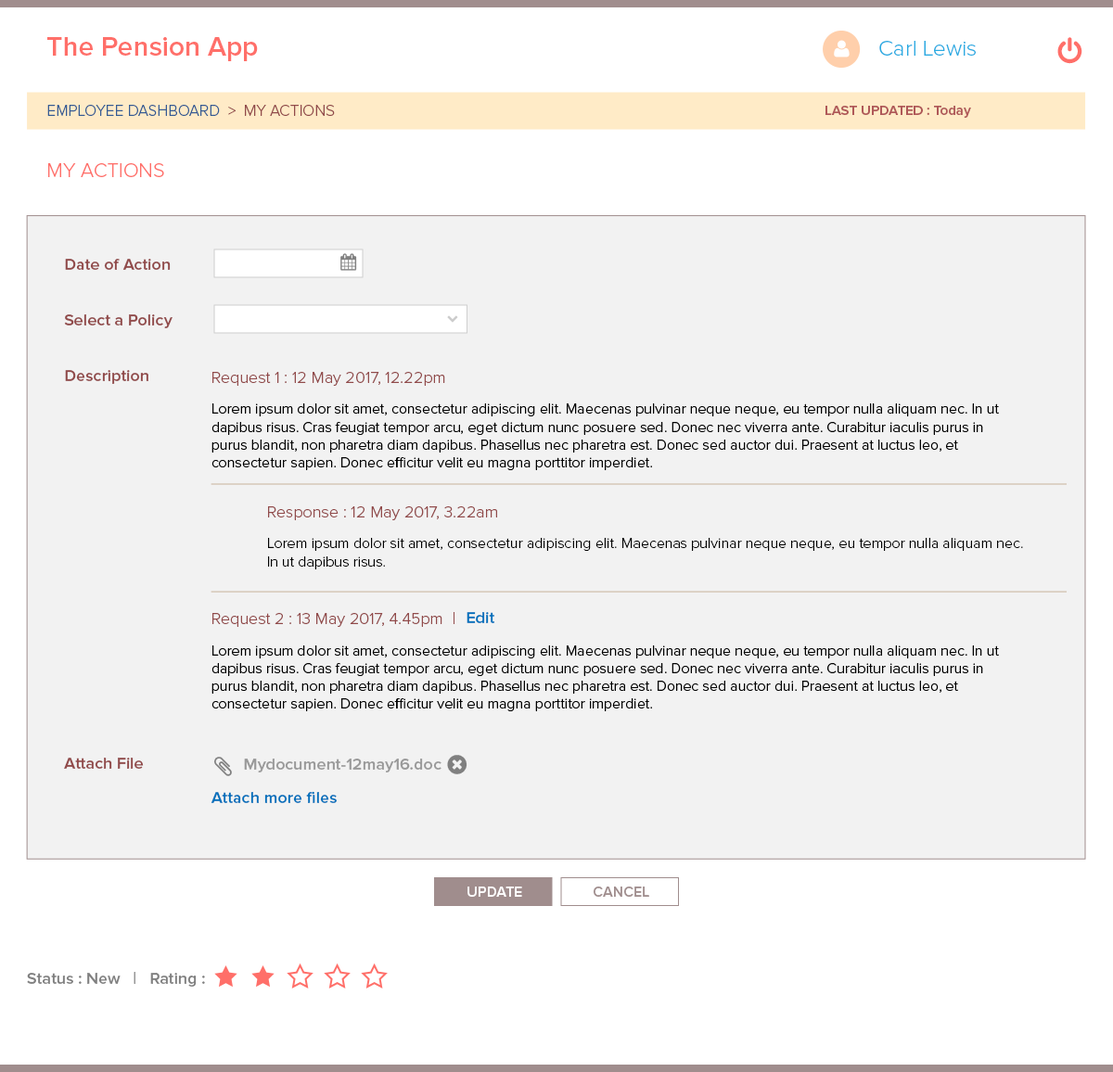
<style>
.page{position:relative;width:1113px;height:1072px;background:#f2f2f2}
.page>*{position:absolute;margin:0}
.t1{font:27.8px "ProximaNova-Semibold";color:#ff6f69}
.t2{font:22.3px "ProximaNova-Light";color:#29abe2}
.t3{font:15.8px "ProximaNova-Light";color:#345b94}
.t4{font:15.8px "ProximaNova-Light";color:#914a4a}
.t5{font:13.9px "ProximaNova-Semibold";color:#af5858}
.t6{font:20.4px "ProximaNova-Light";color:#ff6f69}
.t7{font:16.7px "ProximaNova-Semibold";color:#914a4a}
.t8{font:16.7px "ProximaNova-Light";color:#914a4a}
.t9{font:14.8px "ProximaNova-Light";color:#000000}
.t10{font:16.7px "ProximaNova-Semibold";color:#0071bc}
.t11{font:16.7px "ProximaNova-Semibold";color:#999999}
.t12{font:14.8px "ProximaNova-Semibold";color:#ffffff}
.t13{font:14.8px "ProximaNova-Semibold";color:#a08d8d}
.t14{font:16.7px "ProximaNova-Semibold";color:#808080}
</style>
<div class="page">
<p class="t1" style="left:47px;top:37px;width:211px;height:24px">The Pension App</p>
<p class="t2" style="left:879px;top:41px;width:96px;height:15px">Carl Lewis</p>
<p class="t3" style="left:47px;top:105px;width:288px;height:11px">EMPLOYEE DASHBOARD<span class="t4">  &gt;  MY ACTIONS</span></p>
<p class="t5" style="left:825px;top:106px;width:146px;height:12px">LAST UPDATED : Today</p>
<p class="t6" style="left:48px;top:163px;width:116px;height:14px">MY ACTIONS</p>
<p class="t7" style="left:65px;top:259px;width:106px;height:11px">Date of Action</p>
<p class="t7" style="left:64px;top:314px;width:108px;height:14px">Select a Policy</p>
<p class="t7" style="left:65px;top:370px;width:83px;height:14px">Description</p>
<p class="t8" style="left:212px;top:372px;width:233px;height:14px">Request 1 : 12 May 2017, 12.22pm</p>
<p class="t9" style="left:211px;top:403px;width:788px;height:67px">Lorem ipsum dolor sit amet, consectetur adipiscing elit. Maecenas pulvinar neque neque, eu tempor nulla aliquam nec. In ut dapibus risus. Cras feugiat tempor arcu, eget dictum nunc posuere sed. Donec nec viverra ante. Curabitur iaculis purus in purus blandit, non pharetra diam dapibus. Phasellus nec pharetra est. Donec sed auctor dui. Praesent at luctus leo, et consectetur sapien. Donec efficitur velit eu magna porttitor imperdiet.</p>
<p class="t8" style="left:268px;top:506px;width:229px;height:14px">Response : 12 May 2017, 3.22am</p>
<p class="t9" style="left:268px;top:538px;width:755px;height:31px">Lorem ipsum dolor sit amet, consectetur adipiscing elit. Maecenas pulvinar neque neque, eu tempor nulla aliquam nec. In ut dapibus risus.</p>
<p class="t8" style="left:212px;top:612px;width:242px;height:15px">Request 2 : 13 May 2017, 4.45pm  |</p>
<p class="t10" style="left:466px;top:612px;width:29px;height:11px">Edit</p>
<p class="t9" style="left:211px;top:645px;width:788px;height:66px">Lorem ipsum dolor sit amet, consectetur adipiscing elit. Maecenas pulvinar neque neque, eu tempor nulla aliquam nec. In ut dapibus risus. Cras feugiat tempor arcu, eget dictum nunc posuere sed. Donec nec viverra ante. Curabitur iaculis purus in purus blandit, non pharetra diam dapibus. Phasellus nec pharetra est. Donec sed auctor dui. Praesent at luctus leo, et consectetur sapien. Donec efficitur velit eu magna porttitor imperdiet.</p>
<p class="t7" style="left:64px;top:757px;width:80px;height:12px">Attach File</p>
<p class="t11" style="left:244px;top:758px;width:197px;height:14px">Mydocument-12may16.doc</p>
<p class="t10" style="left:210px;top:791px;width:127px;height:12px">Attach more files</p>
<p class="t12" style="left:467px;top:886px;width:55px;height:11px">UPDATE</p>
<p class="t13" style="left:593px;top:886px;width:56px;height:11px">CANCEL</p>
<p class="t14" style="left:27px;top:972px;width:178px;height:14px">Status : New   |   Rating :</p>
</div>
